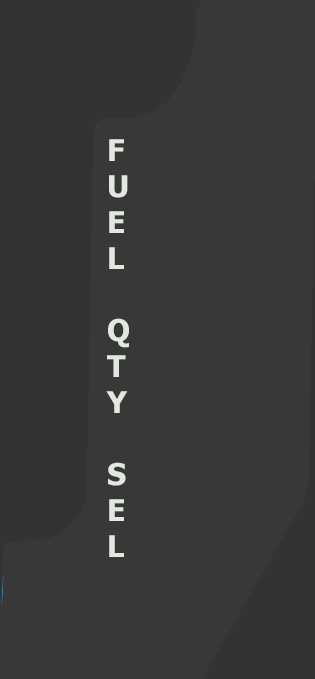
<style>
.page{position:relative;width:315px;height:679px;background:#383838}
.page>*{position:absolute;margin:0}
.t1{font:30px "Tahoma-Bold";color:#e1e8de}
</style>
<div class="page">
<p class="t1" style="left:106px;top:139px;width:23px;height:418px">F<br>U<br>E<br>L<br><br>Q<br>T<br>Y<br><br>S<br>E<br>L</p>
</div>
